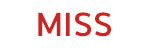
<style>
.page{position:relative;width:150px;height:50px;background:#ffffff}
.page>*{position:absolute;margin:0}
.t1{font:33.3px "GyeonggiTitleMOTF";color:#cd2424}
</style>
<div class="page">
<p class="t1" style="left:38px;top:12px;width:74px;height:25px">MISS</p>
</div>
